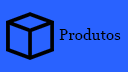
<style>
.page{position:relative;width:128px;height:72px;background:#2962ff}
.page>*{position:absolute;margin:0}
.t1{font:15.4px "Georgia";color:#000000}
</style>
<div class="page">
<p class="t1" style="left:59px;top:28px;width:62px;height:12px">Produtos</p>
</div>
